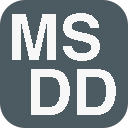
<style>
.page{position:relative;width:128px;height:128px;background:#4c5b61}
.page>*{position:absolute;margin:0}
.t1{font:64px "Helvetica-Bold";color:#f7f7f7}
</style>
<div class="page">
<p class="t1" style="left:12px;top:13px;width:88px;height:48px">MS</p>
<p class="t1" style="left:31px;top:69px;width:85px;height:46px">DD</p>
</div>
